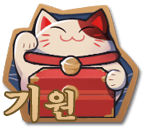
<style>
.page{position:relative;width:146px;height:131px;background:#ffffff}
.page>*{position:absolute;margin:0}
.t1{font:39px "MJemokBatang";letter-spacing:-0.08em;color:#e8c290;font-weight:bold;scale:1.12 1}
.t2{font:32.9px "MJemokBatang";letter-spacing:-0.08em;color:#e8c290;font-weight:bold;scale:1.12 1}
</style>
<div class="page">
<p class="t1" style="left:5px;top:85px;width:70px;height:37px">기<span class="t2">원</span></p>
</div>
